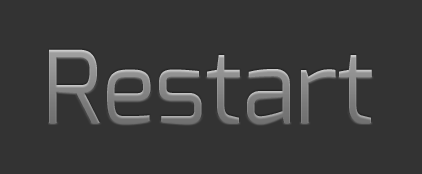
<style>
.page{position:relative;width:422px;height:174px;background:#333333}
.page>*{position:absolute;margin:0}
.t1{font:100px "Exo-Regular"}
</style>
<div class="page">
<p class="t1" style="left:49px;top:49px;width:323px;height:75px">Restart</p>
</div>
